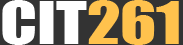
<style>
.page{position:relative;width:183px;height:45px;background:#333333}
.page>*{position:absolute;margin:0}
.t1{font:53.6px "Impact";color:#ffffff;scale:1.24 1}
.t2{font:53.6px "Impact";color:#ffc24d;scale:1.24 1}
</style>
<div class="page">
<p class="t1" style="left:2px;top:0px;width:177px;height:45px">CIT<span class="t2">261</span></p>
</div>
